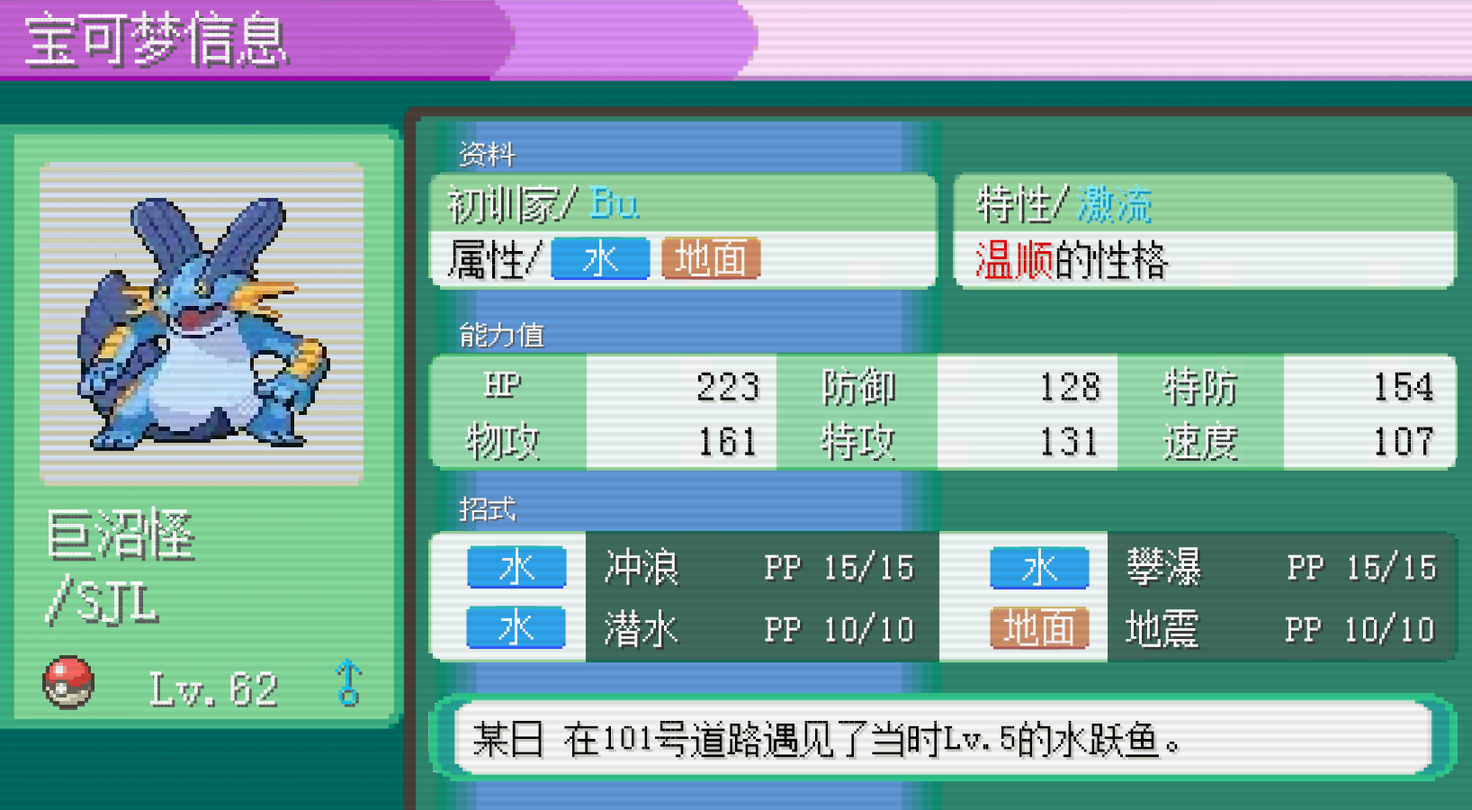
<style>
.page{position:relative;width:1472px;height:810px}
.page>*{position:absolute;margin:0}
.t1{font:52.9px "FZXS14--GB1-0";color:#ffffff}
.t2{font:24.3px "FZXS14--GB1-0";color:#ffffff;scale:1.17 1}
.t3{font:37.4px "FZXS14--GB1-0";color:#ffffff}
.t4{font:47.7px "FZXS14--GB1-0";color:#87eff7}
.t5{font:37.4px "FZXS14--GB1-0";color:#87eff7}
.t6{font:39px "FZXS14--GB1-0";color:#000000}
.t7{font:37.1px "FZXS14--GB1-0";color:#ffffff}
.t8{font:39px "FZXS14--GB1-0";color:#df0808}
.t9{font:24.2px "FZXS14--GB1-0";color:#ffffff;scale:1.17 1}
.t10{font:37.4px/54.8px "FZXS14--GB1-0";color:#ffffff}
.t11{font:43.7px/54.8px "FZXS14--GB1-0";color:#000000}
.t12{font:57px/73.5px "FZXS14--GB1-0";color:#ffffff}
.t13{font:49.7px/73.5px "FZXS14--GB1-0";color:#ffffff}
.t14{font:49.5px "FZXS14--GB1-0";color:#00cdfe}
.t15{font:51.3px "FZXS14--GB1-0";color:#ffffff}
.t16{font:36.2px "FZXS14--GB1-0";color:#000000}
</style>
<div class="page">
<p class="t1" style="left:25px;top:10px;width:261px;height:54px">宝可梦信息</p>
<p class="t2" style="left:460px;top:141px;width:56px;height:25px">资料</p>
<p class="t3" style="left:447px;top:184px;width:129px;height:38px">初训家/</p>
<p class="t4" style="left:589px;top:185px;width:48px;height:31px">Bu</p>
<p class="t3" style="left:976px;top:183px;width:91px;height:38px">特性/</p>
<p class="t5" style="left:1076px;top:183px;width:73px;height:38px">激流</p>
<p class="t6" style="left:447px;top:239px;width:96px;height:40px">属性/</p>
<p class="t7" style="left:583px;top:238px;width:35px;height:38px">水</p>
<p class="t7" style="left:675px;top:238px;width:73px;height:38px">地面</p>
<p class="t6" style="left:976px;top:239px;width:193px;height:40px"><span class="t8">温顺</span>的性格</p>
<p class="t9" style="left:460px;top:322px;width:84px;height:24px">能力值</p>
<p class="t10" style="left:820px;top:365px;width:73px;height:93px">防御<br>特攻</p>
<p class="t10" style="left:1163px;top:365px;width:73px;height:93px">特防<br>速度</p>
<p class="t10" style="left:465px;top:371px;width:72px;height:87px;text-align:center">HP<br>物攻</p>
<p class="t11" style="left:698px;top:372px;width:60px;height:83px;text-align:right">223<br>161</p>
<p class="t11" style="left:1043px;top:372px;width:57px;height:83px;text-align:right">128<br>131</p>
<p class="t11" style="left:1376px;top:372px;width:58px;height:83px;text-align:right">154<br>107</p>
<p class="t9" style="left:460px;top:496px;width:56px;height:25px">招式</p>
<p class="t12" style="left:45px;top:506px;width:146px;height:116px"><span class="t13">巨沼怪<br></span>/SJL</p>
<p class="t7" style="left:499px;top:547px;width:36px;height:38px">水</p>
<p class="t3" style="left:605px;top:547px;width:73px;height:38px">冲浪</p>
<p class="t3" style="left:765px;top:550px;width:148px;height:32px">PP 15/15</p>
<p class="t7" style="left:1022px;top:548px;width:35px;height:38px">水</p>
<p class="t3" style="left:1128px;top:547px;width:72px;height:38px">攀瀑</p>
<p class="t3" style="left:1288px;top:550px;width:147px;height:32px">PP 15/15</p>
<p class="t7" style="left:499px;top:607px;width:35px;height:38px">水</p>
<p class="t3" style="left:605px;top:609px;width:73px;height:38px">潜水</p>
<p class="t3" style="left:765px;top:612px;width:148px;height:32px">PP 10/10</p>
<p class="t7" style="left:1003px;top:608px;width:73px;height:38px">地面</p>
<p class="t3" style="left:1126px;top:609px;width:73px;height:38px">地震</p>
<p class="t3" style="left:1286px;top:612px;width:148px;height:32px">PP 10/10</p>
<p class="t14" style="left:335px;top:658px;width:25px;height:47px">♂</p>
<p class="t15" style="left:150px;top:671px;width:125px;height:34px">Lv.62</p>
<p class="t16" style="left:473px;top:721px;width:705px;height:37px">某日 在101号道路遇见了当时Lv.5的水跃鱼。</p>
</div>
